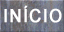
<style>
.page{position:relative;width:64px;height:32px}
.page>*{position:absolute;margin:0}
.t1{font:18px "ArialMT";letter-spacing:0.07em;color:#ffffff;font-weight:bold;scale:0.92 1}
</style>
<div class="page">
<p class="t1" style="left:4px;top:5px;width:58px;height:18px">INÍCIO</p>
</div>
